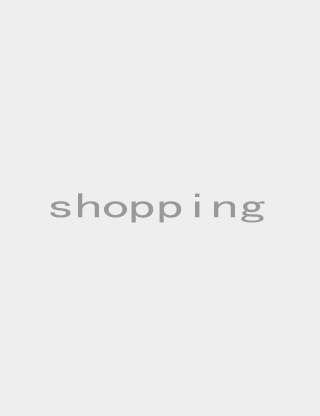
<style>
.page{position:relative;width:320px;height:416px;background:#eeeeee}
.page>*{position:absolute;margin:0}
.t1{font:36px "SimHei";color:#999999;scale:1.52 1}
</style>
<div class="page">
<p class="t1" style="left:50px;top:193px;width:215px;height:30px">shopping</p>
</div>
